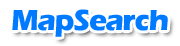
<style>
.page{position:relative;width:180px;height:46px;background:#ffffff}
.page>*{position:absolute;margin:0}
.t1{font:30px "ErasITC-Bold";letter-spacing:-0.035em;color:#007bff}
</style>
<div class="page">
<p class="t1" style="left:12px;top:9px;width:156px;height:28px">MapSearch</p>
</div>
